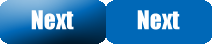
<style>
.page{position:relative;width:212px;height:44px;background:#0068b7}
.page>*{position:absolute;margin:0}
.t1{font:24px "Impact";color:#ffffff}
</style>
<div class="page">
<p class="t1" style="left:31px;top:10px;width:43px;height:20px">Next</p>
<p class="t1" style="left:137px;top:10px;width:43px;height:20px">Next</p>
</div>
